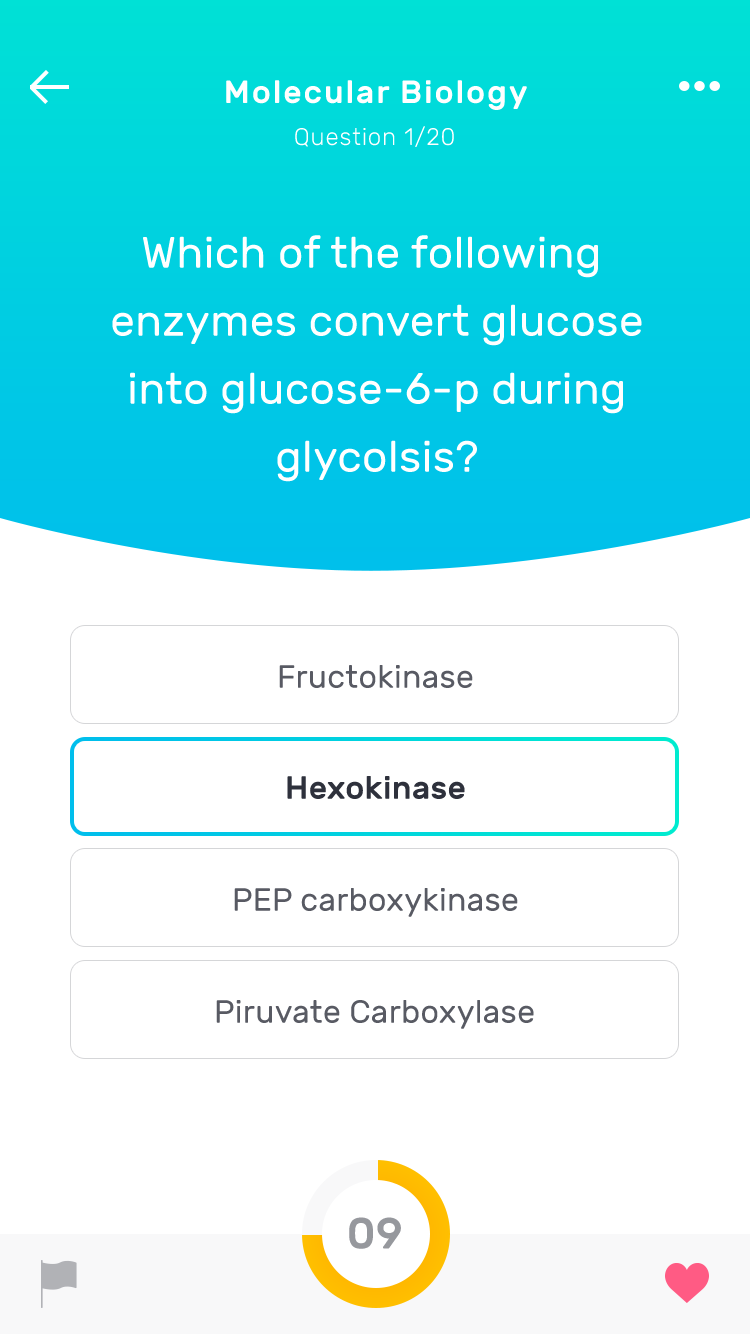
<style>
.page{position:relative;width:750px;height:1334px;background:#ffffff}
.page>*{position:absolute;margin:0}
.t1{font:31.9px "Rubik-Medium";letter-spacing:0.06em;color:#ffffff}
.t2{font:23.9px "Rubik-Light";letter-spacing:0.035em;color:#ffffff}
.t3{font:44px/68px "Rubik-Regular";letter-spacing:0.01em;color:#ffffff}
.t4{font:32px "Rubik-Regular";letter-spacing:0.01em;color:#585a63}
.t5{font:32px "Rubik-Medium";letter-spacing:0.01em;color:#2e313c}
.t6{font:44px "Rubik-Medium";letter-spacing:0.01em;color:#96989d}
</style>
<div class="page">
<p class="t1" style="left:226px;top:80px;width:301px;height:30px">Molecular Biology</p>
<p class="t2" style="left:295px;top:126px;width:159px;height:21px">Question 1/20</p>
<p class="t3" style="left:112px;top:235px;width:530px;height:247px;text-align:center">Which of the following <br>enzymes convert glucose<br>into glucose-6-p during<br>glycolsis?</p>
<p class="t4" style="left:279px;top:665px;width:194px;height:23px">Fructokinase</p>
<p class="t5" style="left:287px;top:776px;width:178px;height:23px">Hexokinase</p>
<p class="t4" style="left:234px;top:888px;width:284px;height:29px">PEP carboxykinase</p>
<p class="t4" style="left:216px;top:1000px;width:318px;height:29px">Piruvate Carboxylase</p>
<p class="t6" style="left:349px;top:1217px;width:52px;height:32px">09</p>
</div>
